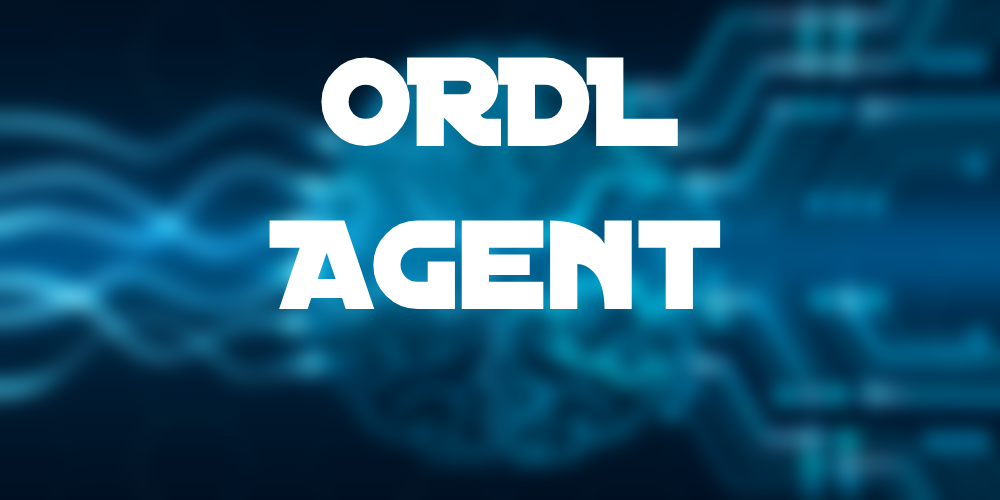
<style>
.page{position:relative;width:1000px;height:500px}
.page>*{position:absolute;margin:0}
.t1{font:136px "DistantGalaxy";color:#ffffff}
</style>
<div class="page">
<p class="t1" style="left:269px;top:57px;width:452px;height:252px;text-align:center">ORDL<br>Agent</p>
</div>
